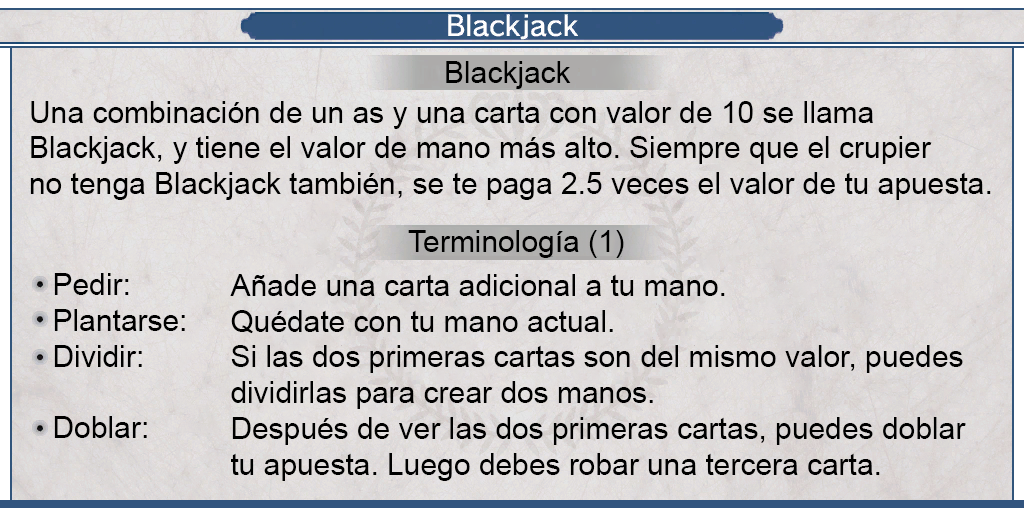
<style>
.page{position:relative;width:1024px;height:512px}
.page>*{position:absolute;margin:0}
.t1{font:30px "ArialMT";color:#000000}
.t2{font:29.9px "ArialMT";color:#000000}
.t3{font:29.6px "ArialMT";color:#000000}
</style>
<div class="page">
<p class="t1" style="left:446px;top:61px;width:125px;height:28px">Blackjack</p>
<p class="t2" style="left:30px;top:101px;width:961px;height:99px;text-align:justify">Una combinación de un as y una carta con valor de 10 se llama<br>Blackjack, y tiene el valor de mano más alto. Siempre que el crupier<br>no tenga Blackjack también, se te paga 2.5 veces el valor de tu apuesta.</p>
<p class="t3" style="left:408px;top:230px;width:216px;height:28px">Terminología (1)</p>
<p class="t2" style="left:54px;top:273px;width:131px;height:165px;text-align:justify">Pedir: <br>Plantarse:<br>Dividir:<br><br>Doblar:</p>
<p class="t2" style="left:230px;top:274px;width:736px;height:207px;text-align:justify">Añade una carta adicional a tu mano.<br>Quédate con tu mano actual.<br>Si las dos primeras cartas son del mismo valor, puedes<br>dividirlas para crear dos manos.<br>Después de ver las dos primeras cartas, puedes doblar<br>tu apuesta. Luego debes robar una tercera carta.</p>
</div>
